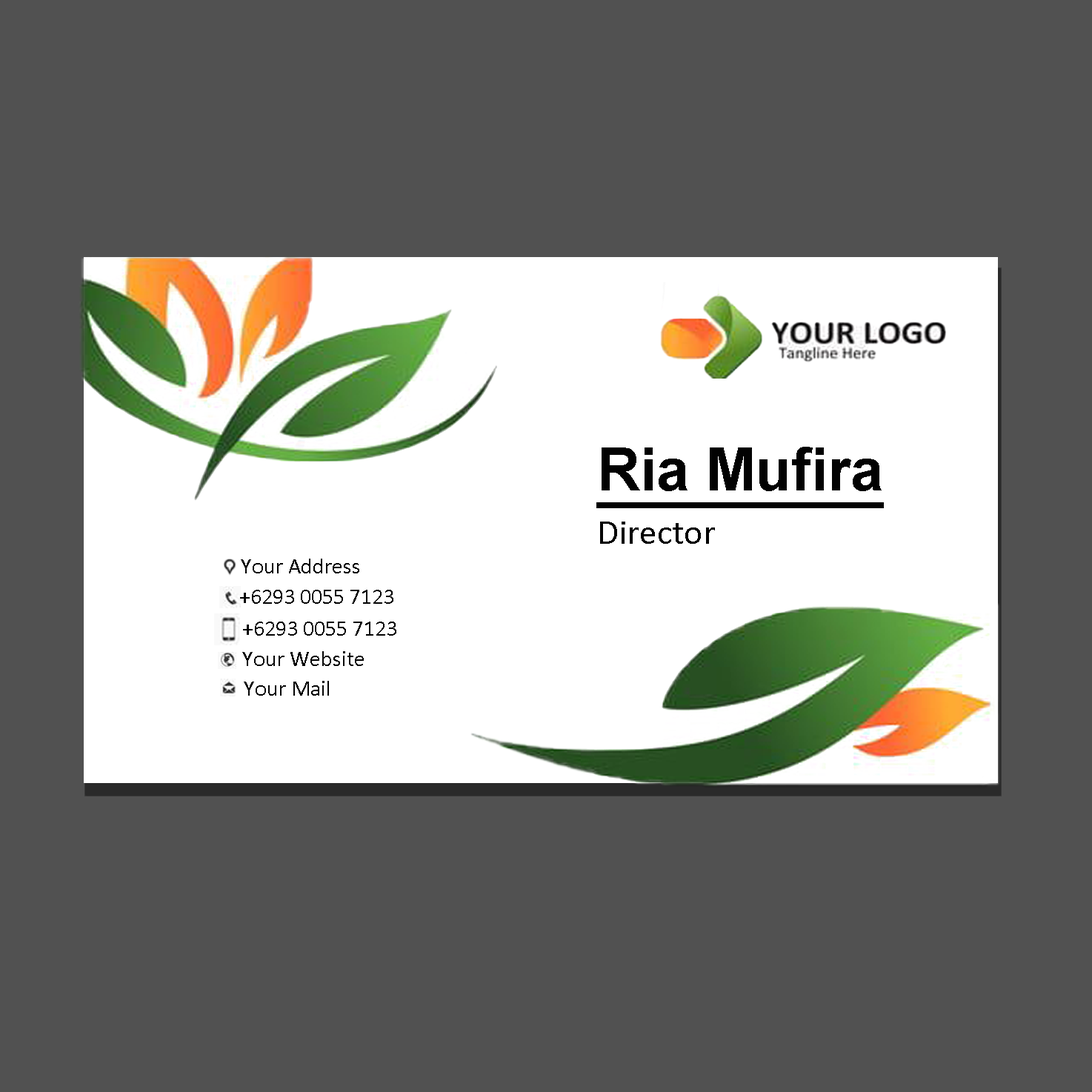
<style>
.page{position:relative;width:1092px;height:1092px;background:#515151}
.page>*{position:absolute;margin:0}
.t1{font:59.3px "Arial-BoldMT";color:#020202;text-decoration:underline}
.t2{font:35.6px "Calibri";color:#020202}
.t3{font:22.2px "Calibri";color:#020202}
</style>
<div class="page">
<p class="t1" style="left:596px;top:447px;width:288px;height:61px">Ria Mufira</p>
<p class="t2" style="left:600px;top:522px;width:115px;height:22px">Director</p>
<p class="t3" style="left:241px;top:559px;width:118px;height:14px">Your Address</p>
<p class="t3" style="left:240px;top:590px;width:153px;height:14px">+6293 0055 7123</p>
<p class="t3" style="left:243px;top:622px;width:153px;height:14px">+6293 0055 7123</p>
<p class="t3" style="left:242px;top:651px;width:122px;height:15px">Your Website</p>
<p class="t3" style="left:244px;top:681px;width:85px;height:15px">Your Mail</p>
</div>
